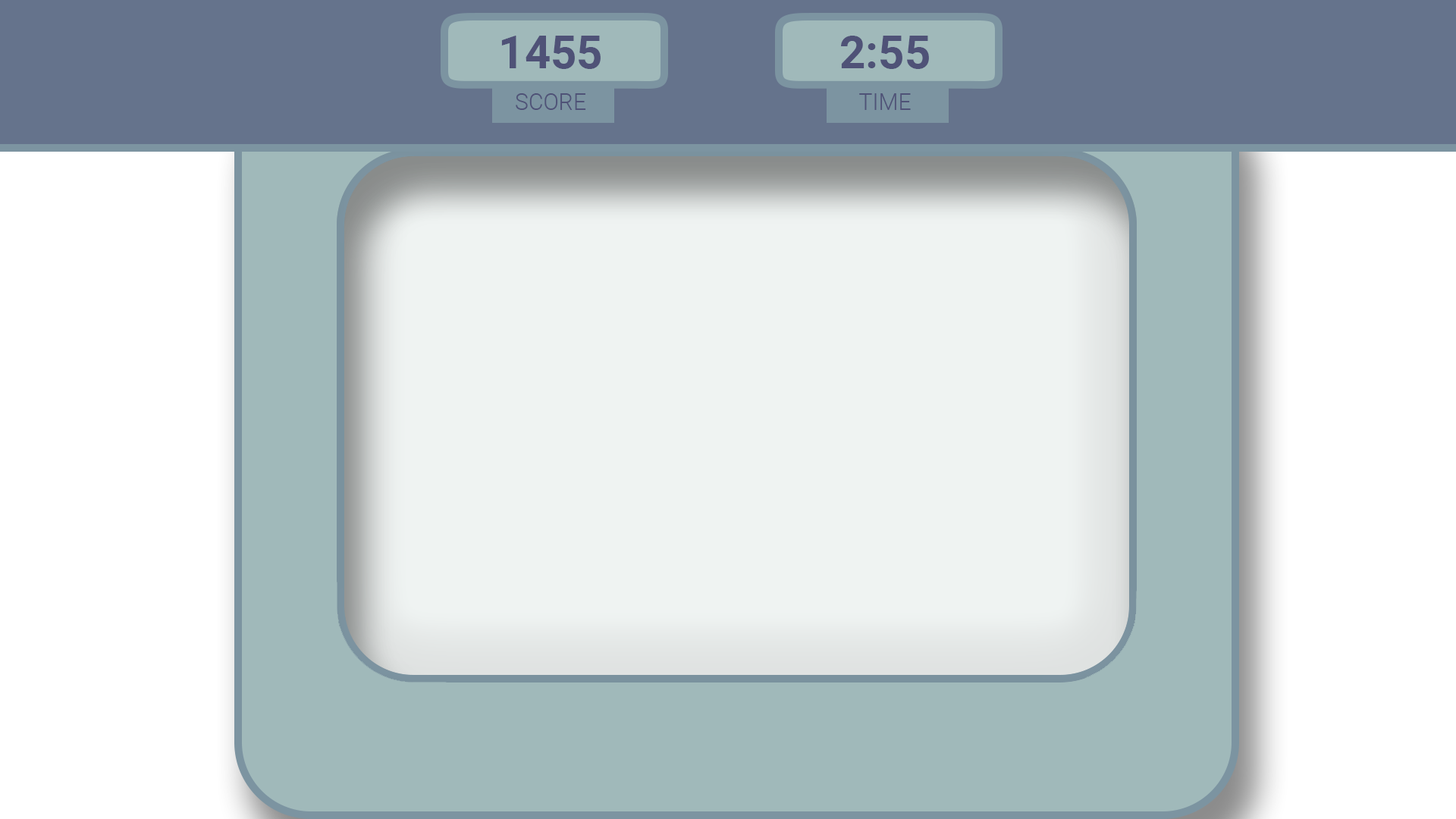
<style>
.page{position:relative;width:1456px;height:819px;background:#ffffff}
.page>*{position:absolute;margin:0}
.t1{font:45.5px "Roboto-Bold";color:#4f5277}
.t2{font:22.7px "Roboto-Light";color:#4f5277}
</style>
<div class="page">
<p class="t1" style="left:501px;top:36px;width:100px;height:33px">1455</p>
<p class="t1" style="left:841px;top:36px;width:88px;height:33px">2:55</p>
<p class="t2" style="left:516px;top:93px;width:70px;height:17px">SCORE</p>
<p class="t2" style="left:859px;top:93px;width:52px;height:17px">TIME</p>
</div>
